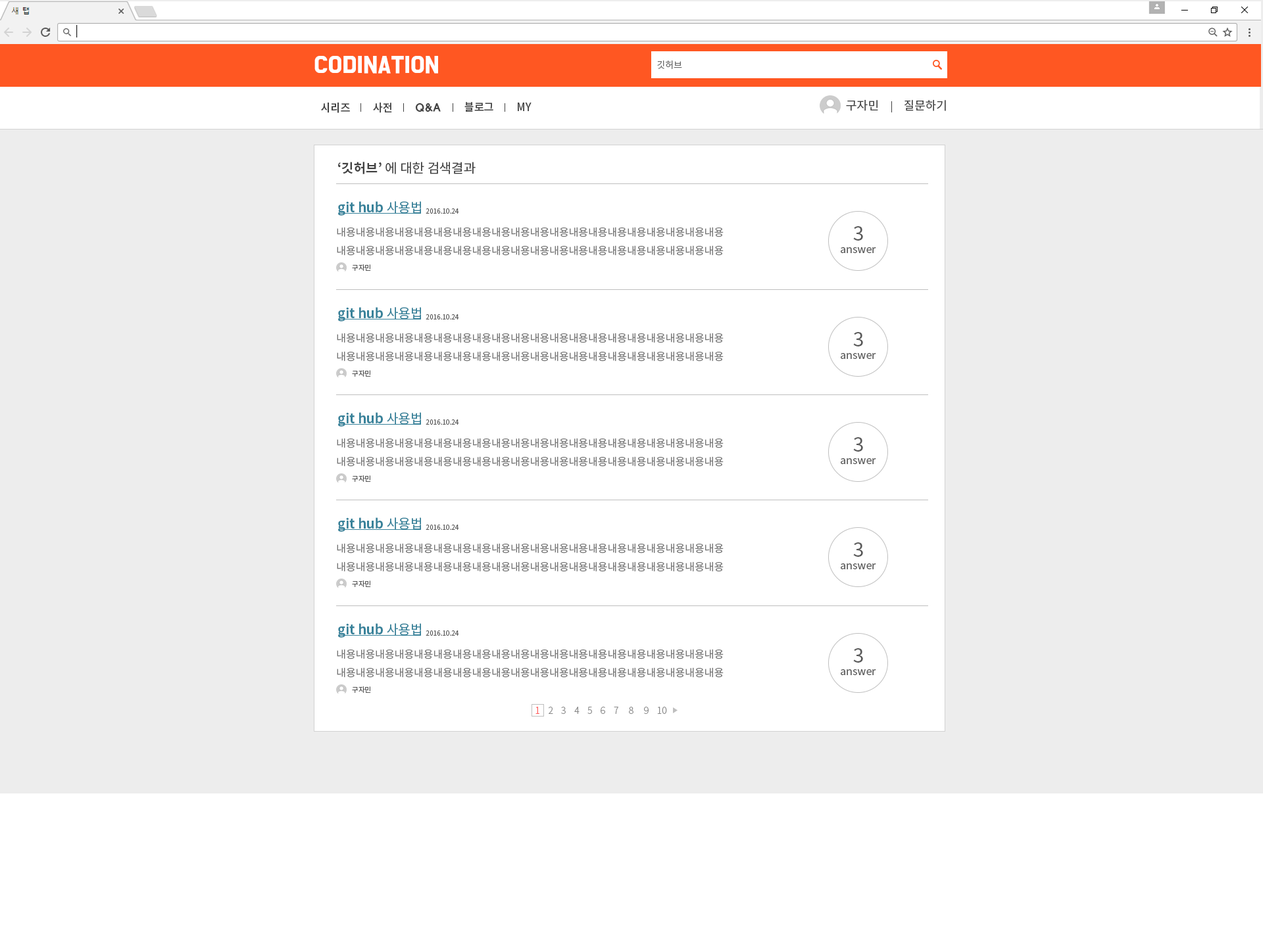
<style>
.page{position:relative;width:1263px;height:944px;background:#ffffff}
.page>*{position:absolute;margin:0}
.t1{font:19.7px "BMDoHyeon";color:#ffffff;font-weight:bold}
.t2{font:9.2px "NotoSansCJKkr-DemiLight";color:#6c6c6c}
.t3{font:10.9px "NotoSansCJKkr-Medium";letter-spacing:-0.01em;color:#424242}
.t4{font:11.8px "NotoSansCJKkr-Regular";color:#424242}
.t5{font:10.9px "HYwulB";letter-spacing:-0.025em;color:#424242}
.t6{font:13.2px "NotoSansCJKkr-Regular";color:#424242}
.t7{font:13.2px "NotoSansCJKkr-Bold";color:#424242}
.t8{font:13.2px "NotoSansCJKkr-Bold";color:#38829a}
.t9{font:13.2px "NotoSansCJKkr-Regular";color:#38829a}
.t10{font:6.6px "NotoSansCJKkr-Regular";color:#595959}
.t11{font:10.5px "NotoSansCJKkr-Regular";color:#757575}
.t12{font:19.7px "NotoSansCJKkr-Regular";color:#595959}
.t13{font:10.5px "NotoSansCJKkr-Regular";color:#595959}
.t14{font:6.8px "NotoSansCJKkr-Regular";color:#595959}
.t15{font:9.2px "NotoSansCJKkr-Light";color:#898989}
.t16{font:9.2px "NotoSansCJKkr-Light";color:#ff5b5b}
</style>
<div class="page">
<p class="t1" style="left:314px;top:56px;width:124px;height:18px">CODINATION</p>
<p class="t2" style="left:657px;top:61px;width:25px;height:8px">깃허브</p>
<p class="t3" style="left:464px;top:102px;width:29px;height:10px">블로그</p>
<p class="t4" style="left:846px;top:100px;width:32px;height:11px">구자민</p>
<p class="t4" style="left:904px;top:100px;width:42px;height:11px">질문하기</p>
<p class="t3" style="left:321px;top:103px;width:29px;height:10px">시리즈</p>
<p class="t3" style="left:373px;top:103px;width:19px;height:10px">사전</p>
<p class="t5" style="left:415px;top:103px;width:26px;height:9px">Q&amp;A</p>
<p class="t3" style="left:518px;top:103px;width:13px;height:8px">MY</p>
<p class="t6" style="left:338px;top:162px;width:137px;height:12px"><span class="t7">‘깃허브’ </span>에 대한 검색결과</p>
<p class="t8" style="left:338px;top:201px;width:83px;height:15px">git hub <span class="t9">사용법</span></p>
<p class="t10" style="left:425px;top:208px;width:34px;height:6px">2016.10.24</p>
<p class="t11" style="left:337px;top:227px;width:386px;height:29px">내용내용내용내용내용내용내용내용내용내용내용내용내용내용내용내용내용내용내용내용<br>내용내용내용내용내용내용내용내용내용내용내용내용내용내용내용내용내용내용내용내용</p>
<p class="t12" style="left:853px;top:226px;width:10px;height:15px">3</p>
<p class="t13" style="left:840px;top:247px;width:36px;height:6px">answer</p>
<p class="t14" style="left:352px;top:264px;width:19px;height:7px">구자민</p>
<p class="t8" style="left:338px;top:307px;width:83px;height:15px">git hub <span class="t9">사용법</span></p>
<p class="t10" style="left:425px;top:314px;width:34px;height:6px">2016.10.24</p>
<p class="t11" style="left:337px;top:333px;width:386px;height:29px">내용내용내용내용내용내용내용내용내용내용내용내용내용내용내용내용내용내용내용내용<br>내용내용내용내용내용내용내용내용내용내용내용내용내용내용내용내용내용내용내용내용</p>
<p class="t12" style="left:853px;top:332px;width:10px;height:15px">3</p>
<p class="t13" style="left:840px;top:353px;width:36px;height:6px">answer</p>
<p class="t14" style="left:352px;top:370px;width:19px;height:7px">구자민</p>
<p class="t8" style="left:338px;top:412px;width:83px;height:15px">git hub <span class="t9">사용법</span></p>
<p class="t10" style="left:425px;top:420px;width:34px;height:5px">2016.10.24</p>
<p class="t11" style="left:337px;top:438px;width:386px;height:29px">내용내용내용내용내용내용내용내용내용내용내용내용내용내용내용내용내용내용내용내용<br>내용내용내용내용내용내용내용내용내용내용내용내용내용내용내용내용내용내용내용내용</p>
<p class="t12" style="left:853px;top:437px;width:10px;height:15px">3</p>
<p class="t13" style="left:840px;top:458px;width:36px;height:6px">answer</p>
<p class="t14" style="left:352px;top:475px;width:19px;height:7px">구자민</p>
<p class="t8" style="left:338px;top:518px;width:83px;height:14px">git hub <span class="t9">사용법</span></p>
<p class="t10" style="left:425px;top:525px;width:34px;height:5px">2016.10.24</p>
<p class="t11" style="left:337px;top:543px;width:386px;height:29px">내용내용내용내용내용내용내용내용내용내용내용내용내용내용내용내용내용내용내용내용<br>내용내용내용내용내용내용내용내용내용내용내용내용내용내용내용내용내용내용내용내용</p>
<p class="t12" style="left:853px;top:543px;width:10px;height:14px">3</p>
<p class="t13" style="left:840px;top:564px;width:36px;height:6px">answer</p>
<p class="t14" style="left:352px;top:581px;width:19px;height:6px">구자민</p>
<p class="t8" style="left:338px;top:623px;width:83px;height:15px">git hub <span class="t9">사용법</span></p>
<p class="t10" style="left:425px;top:631px;width:34px;height:5px">2016.10.24</p>
<p class="t11" style="left:337px;top:649px;width:386px;height:29px">내용내용내용내용내용내용내용내용내용내용내용내용내용내용내용내용내용내용내용내용<br>내용내용내용내용내용내용내용내용내용내용내용내용내용내용내용내용내용내용내용내용</p>
<p class="t12" style="left:853px;top:648px;width:10px;height:15px">3</p>
<p class="t13" style="left:840px;top:669px;width:36px;height:6px">answer</p>
<p class="t14" style="left:352px;top:687px;width:19px;height:6px">구자민</p>
<p class="t15" style="left:535px;top:707px;width:132px;height:7px"><span class="t16">1 </span>   2    3    4    5    6    7     8     9    10</p>
</div>
